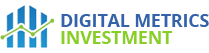
<style>
.page{position:relative;width:209px;height:53px;background:#ffffff}
.page>*{position:absolute;margin:0}
.t1{font:17.6px/17.6px "OpenSans-Bold";color:#3563a9}
.t2{font:17.6px/17.6px "OpenSans-Bold";color:#87ce26}
</style>
<div class="page">
<p class="t1" style="left:61px;top:14px;width:148px;height:30px">DIGITAL METRICS<br><span class="t2">INVESTMENT</span></p>
</div>
